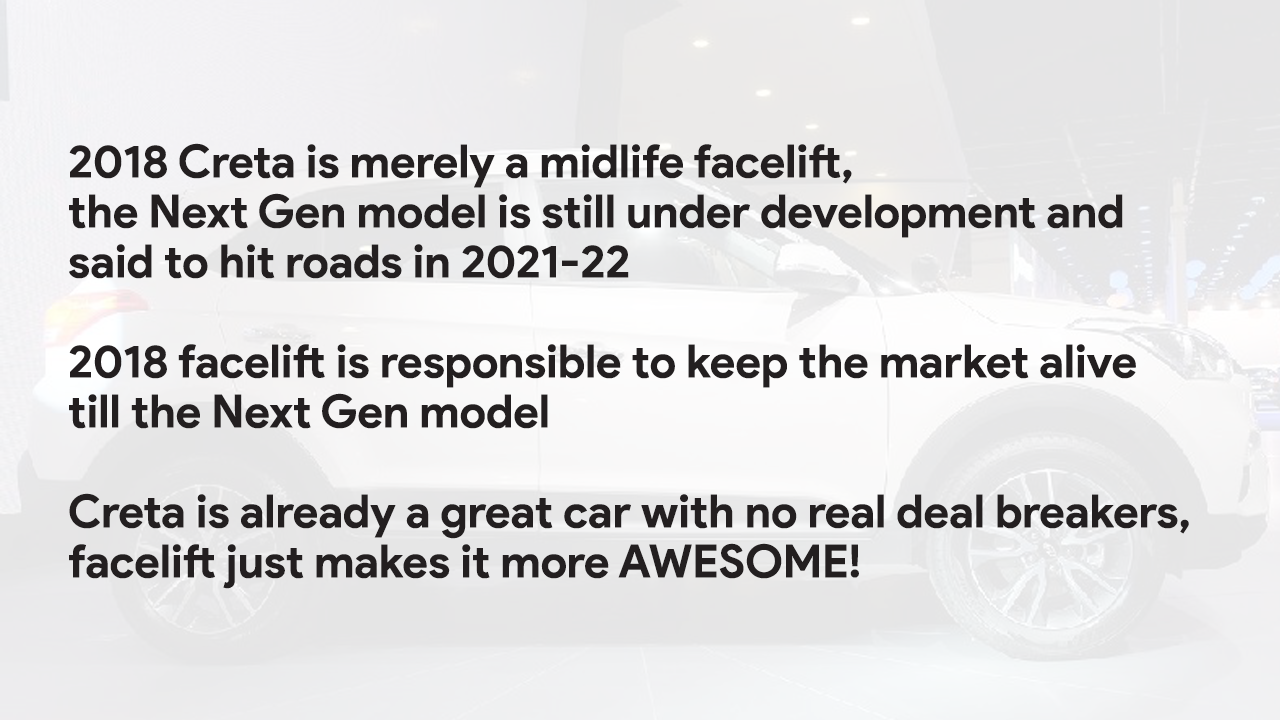
<style>
.page{position:relative;width:1280px;height:720px}
.page>*{position:absolute;margin:0}
.t1{font:45.8px/50px "ProductSans-Bold";color:#231f20}
</style>
<div class="page">
<p class="t1" style="left:69px;top:143px;width:1120px;height:446px">2018 Creta is merely a midlife facelift,<br>the Next Gen model is still under development and <br>said to hit roads in 2021-22<br><br>2018 facelift is responsible to keep the market alive<br>till the Next Gen model<br><br>Creta is already a great car with no real deal breakers, <br>facelift just makes it more AWESOME!</p>
</div>
